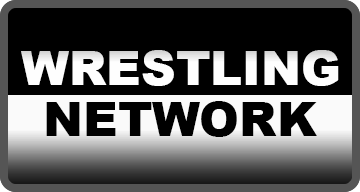
<style>
.page{position:relative;width:360px;height:192px;background:#000000}
.page>*{position:absolute;margin:0}
.t1{font:48px "Arial-Black";color:#fefefe}
.t2{font:48px "Arial-Black";color:#000000}
</style>
<div class="page">
<p class="t1" style="left:21px;top:50px;width:318px;height:36px">WRESTLING</p>
<p class="t2" style="left:46px;top:101px;width:271px;height:36px">NETWORK</p>
</div>
